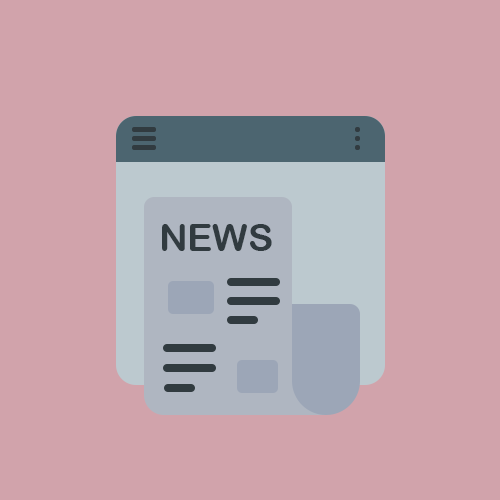
<style>
.page{position:relative;width:500px;height:500px;background:#d1a3ab}
.page>*{position:absolute;margin:0}
.t1{font:37.5px "ArialRoundedMTBold";color:#313b40}
</style>
<div class="page">
<p class="t1" style="left:162px;top:224px;width:110px;height:27px">NEWS</p>
</div>
